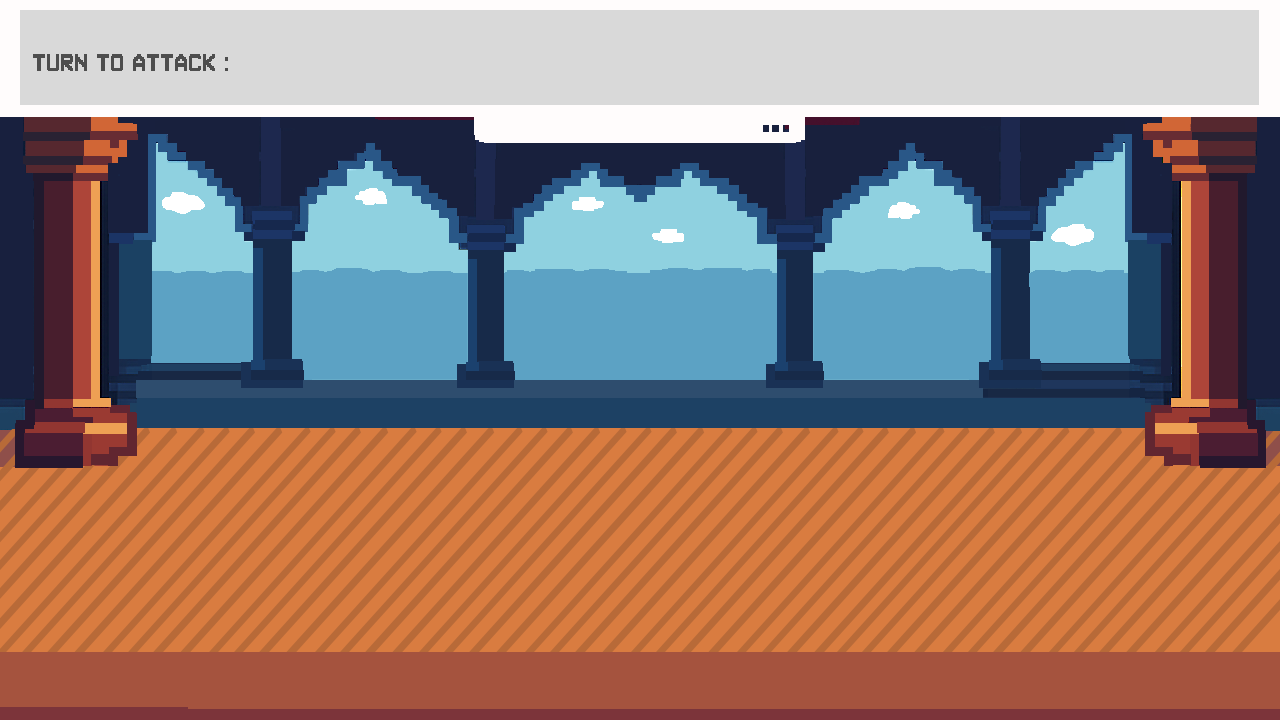
<style>
.page{position:relative;width:1280px;height:720px}
.page>*{position:absolute;margin:0}
.t1{font:24px "VCRosdNEUE";color:#4e4e4e}
</style>
<div class="page">
<p class="t1" style="left:33px;top:54px;width:195px;height:17px">TURN TO ATTACK :</p>
</div>
